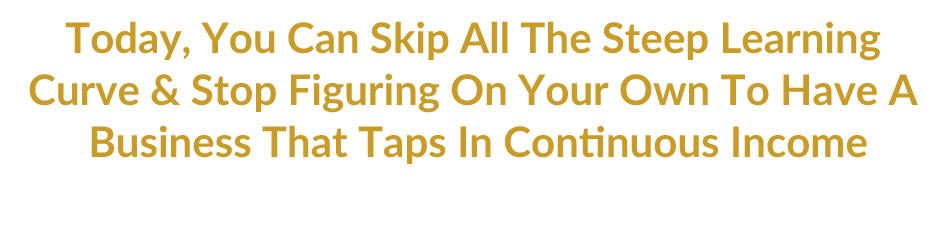
<style>
.page{position:relative;width:942px;height:246px;background:#ffffff}
.page>*{position:absolute;margin:0}
.t1{font:42px/52px "Lato-Bold";color:#c99c29}
</style>
<div class="page">
<p class="t1" style="left:29px;top:21px;width:889px;height:143px;text-align:center">Today, You Can Skip All The Steep Learning <br>Curve &amp; Stop Figuring On Your Own To Have A <br>Business That Taps In Continuous Income</p>
</div>
